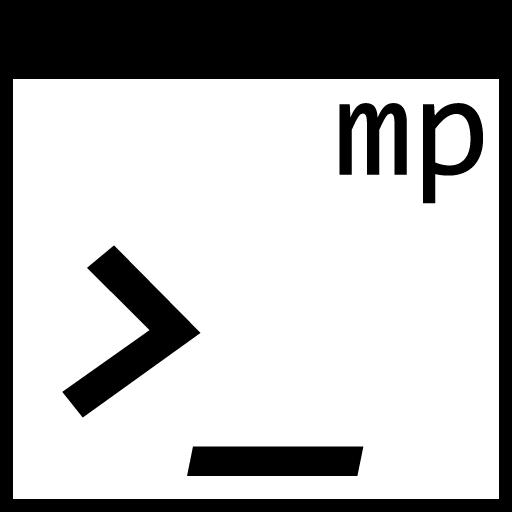
<style>
.page{position:relative;width:512px;height:512px;background:#ffffff}
.page>*{position:absolute;margin:0}
.t1{font:143px "Consolas";color:#000000}
.t2{font:310px "Consolas-BoldItalic";color:#000000}
</style>
<div class="page">
<p class="t1" style="left:339px;top:103px;width:144px;height:101px">mp</p>
<p class="t2" style="left:62px;top:245px;width:302px;height:231px">&gt;_</p>
</div>
